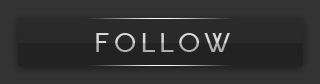
<style>
.page{position:relative;width:320px;height:84px;background:#333333}
.page>*{position:absolute;margin:0}
.t1{font:29.2px "SFOldRepublic";letter-spacing:0.14em}
</style>
<div class="page">
<p class="t1" style="left:96px;top:33px;width:134px;height:19px">FOLLOW</p>
</div>
